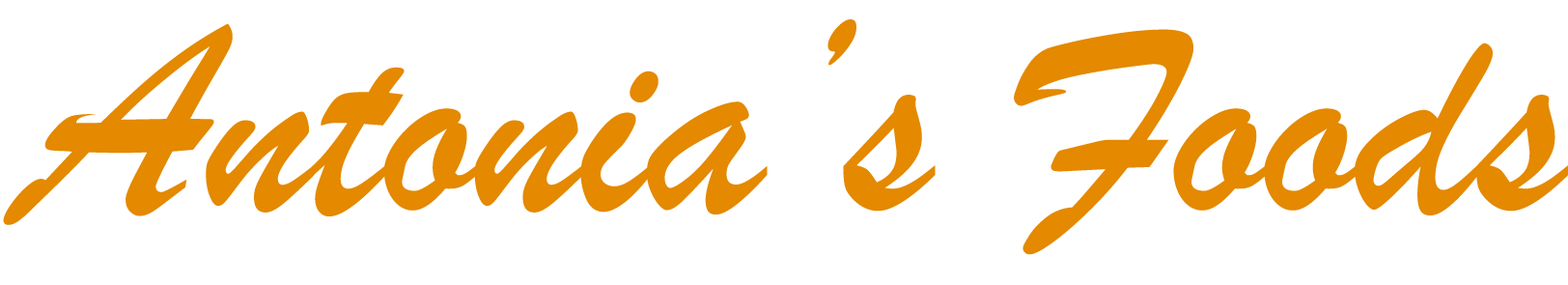
<style>
.page{position:relative;width:1568px;height:285px;background:#ffffff}
.page>*{position:absolute;margin:0}
.t1{font:289.7px "BrushScriptMT";color:#e48900}
</style>
<div class="page">
<p class="t1" style="left:3px;top:19px;width:1566px;height:236px">Antonia’s Foods</p>
</div>
